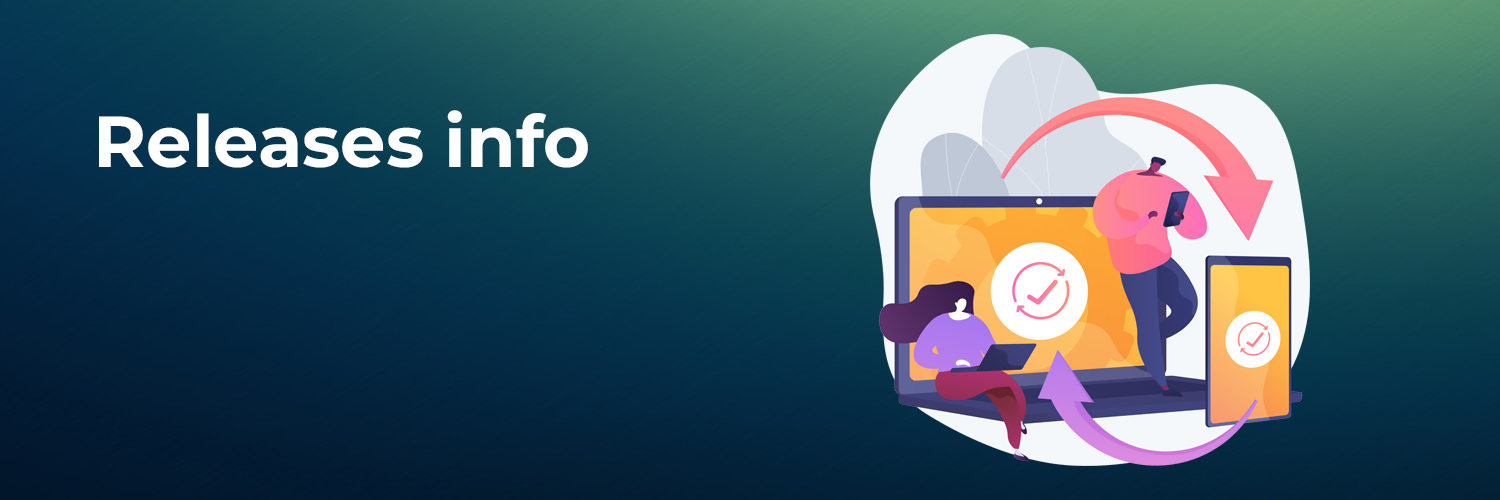
<style>
.page{position:relative;width:1500px;height:500px}
.page>*{position:absolute;margin:0}
.t1{font:72px "Montserrat-Bold";color:#ffffff}
</style>
<div class="page">
<p class="t1" style="left:99px;top:110px;width:489px;height:58px">Releases info</p>
</div>
